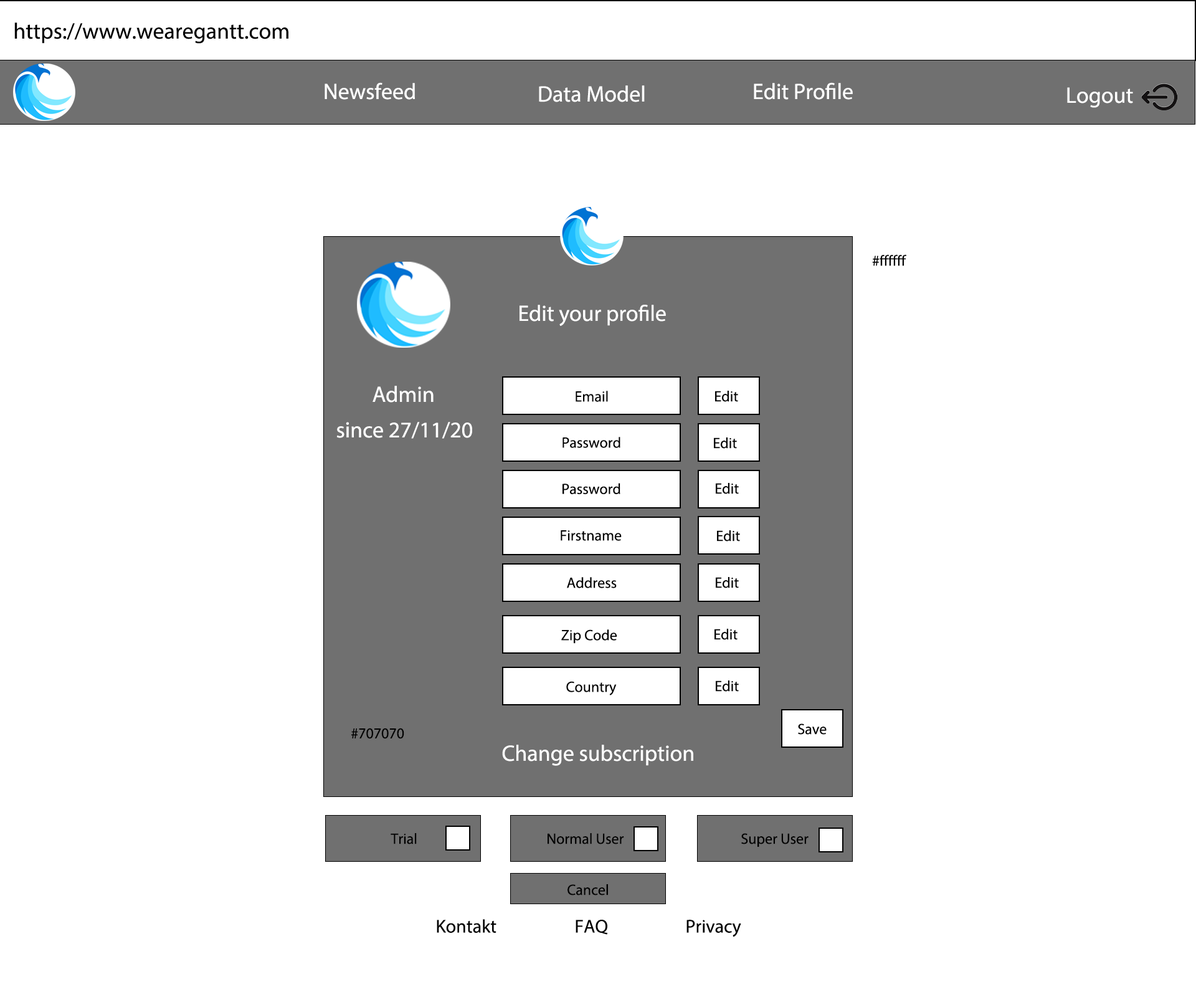
<style>
.page{position:relative;width:1196px;height:997px;background:#ffffff}
.page>*{position:absolute;margin:0}
.t1{font:22.4px "MyriadPro-Regular";color:#000000}
.t2{font:22.4px "MyriadPro-Regular";color:#ffffff}
.t3{font:15px "MyriadPro-Regular";color:#000000}
.t4{font:18.7px "MyriadPro-Regular";color:#000000}
</style>
<div class="page">
<p class="t1" style="left:14px;top:22px;width:274px;height:22px">https://www.wearegantt.com</p>
<p class="t2" style="left:325px;top:82px;width:90px;height:18px">Newsfeed</p>
<p class="t2" style="left:539px;top:85px;width:106px;height:17px">Data Model</p>
<p class="t2" style="left:754px;top:82px;width:99px;height:18px">Edit Profile</p>
<p class="t2" style="left:1067px;top:87px;width:66px;height:21px">Logout</p>
<p class="t3" style="left:872px;top:254px;width:35px;height:12px">#ffffff</p>
<p class="t2" style="left:520px;top:305px;width:146px;height:21px">Edit your profile</p>
<p class="t2" style="left:373px;top:386px;width:61px;height:16px">Admin</p>
<p class="t3" style="left:576px;top:391px;width:32px;height:11px">Email</p>
<p class="t3" style="left:715px;top:391px;width:23px;height:11px">Edit</p>
<p class="t2" style="left:336px;top:422px;width:136px;height:17px">since 27/11/20</p>
<p class="t3" style="left:563px;top:437px;width:58px;height:11px">Password</p>
<p class="t3" style="left:714px;top:437px;width:23px;height:12px">Edit</p>
<p class="t3" style="left:563px;top:483px;width:58px;height:11px">Password</p>
<p class="t3" style="left:716px;top:483px;width:23px;height:11px">Edit</p>
<p class="t3" style="left:561px;top:530px;width:61px;height:11px">Firstname</p>
<p class="t3" style="left:717px;top:530px;width:23px;height:11px">Edit</p>
<p class="t3" style="left:567px;top:577px;width:50px;height:11px">Address</p>
<p class="t3" style="left:716px;top:577px;width:23px;height:11px">Edit</p>
<p class="t3" style="left:561px;top:629px;width:56px;height:15px">Zip Code</p>
<p class="t3" style="left:715px;top:629px;width:23px;height:11px">Edit</p>
<p class="t3" style="left:566px;top:681px;width:51px;height:14px">Country</p>
<p class="t3" style="left:716px;top:680px;width:23px;height:12px">Edit</p>
<p class="t3" style="left:798px;top:723px;width:29px;height:12px">Save</p>
<p class="t3" style="left:351px;top:728px;width:53px;height:11px">#707070</p>
<p class="t2" style="left:502px;top:745px;width:191px;height:21px">Change subscription</p>
<p class="t3" style="left:391px;top:833px;width:26px;height:11px">Trial</p>
<p class="t3" style="left:548px;top:833px;width:76px;height:11px">Normal User</p>
<p class="t3" style="left:741px;top:833px;width:68px;height:14px">Super User</p>
<p class="t3" style="left:568px;top:884px;width:40px;height:11px">Cancel</p>
<p class="t4" style="left:437px;top:919px;width:60px;height:14px">Kontakt</p>
<p class="t4" style="left:576px;top:920px;width:32px;height:15px">FAQ</p>
<p class="t4" style="left:687px;top:920px;width:54px;height:17px">Privacy</p>
</div>
